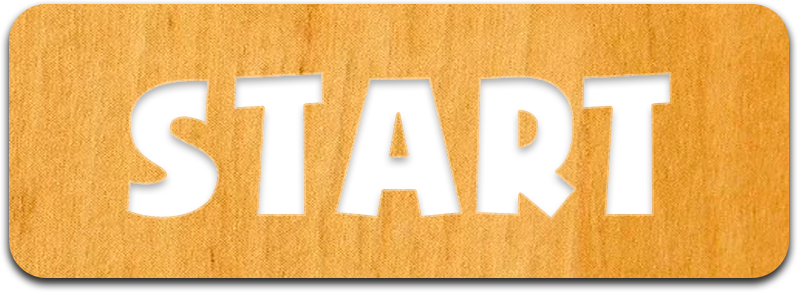
<style>
.page{position:relative;width:798px;height:292px}
.page>*{position:absolute;margin:0}
.t1{font:225px "SoupofJustice";color:#ffffff}
</style>
<div class="page">
<p class="t1" style="left:126px;top:72px;width:546px;height:148px">START</p>
</div>
